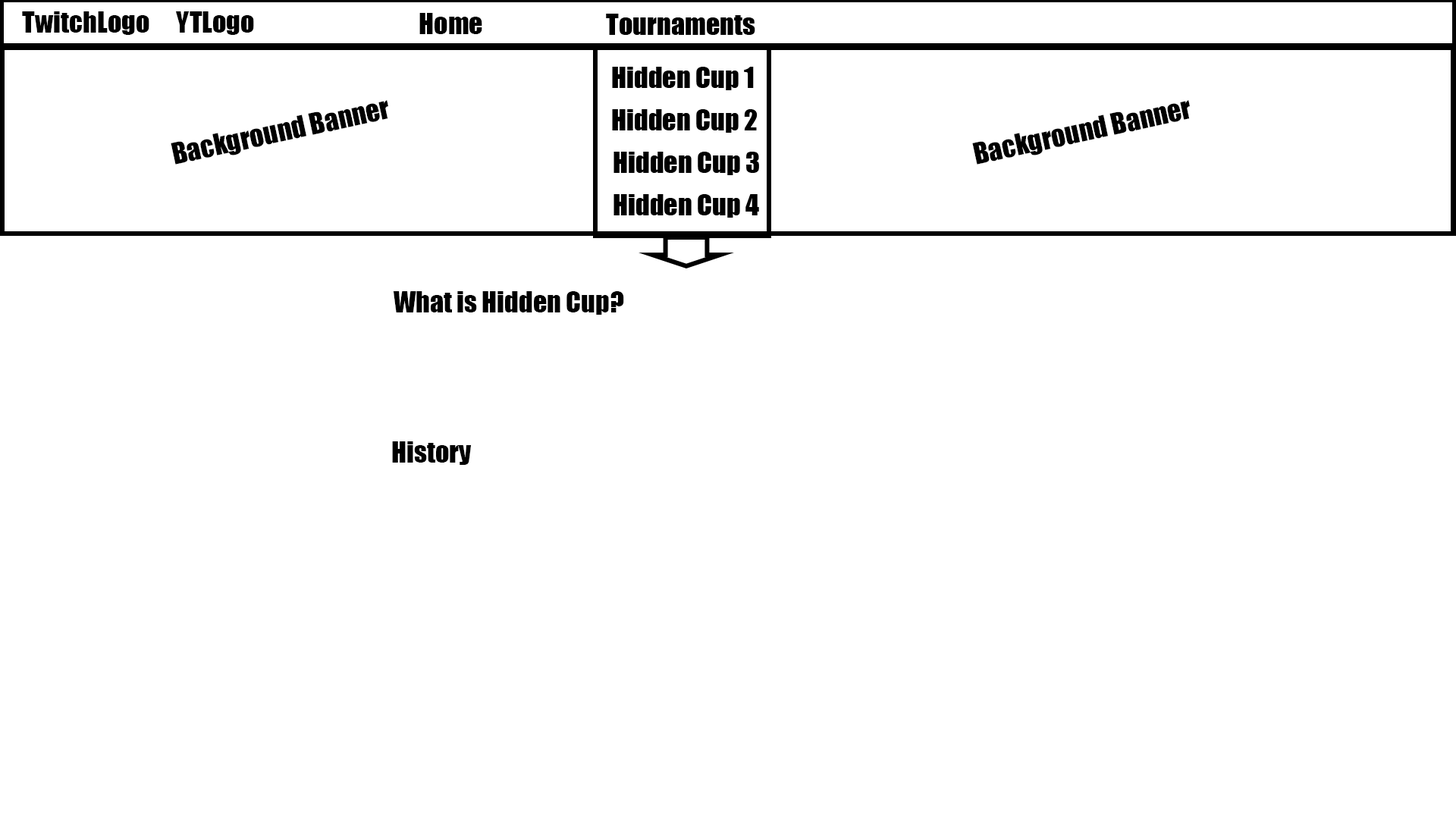
<style>
.page{position:relative;width:1456px;height:819px;background:#ffffff}
.page>*{position:absolute;margin:0}
.t1{font:27.3px "Impact";color:#000000}
</style>
<div class="page">
<p class="t1" style="left:22px;top:11px;width:127px;height:24px">TwitchLogo</p>
<p class="t1" style="left:176px;top:11px;width:78px;height:24px">YTLogo</p>
<p class="t1" style="left:419px;top:13px;width:63px;height:21px">Home</p>
<p class="t1" style="left:171px;top:100px;width:217px;height:65px;rotate:-12deg">Background Banner</p>
<p class="t1" style="left:972px;top:100px;width:218px;height:65px;rotate:-12deg">Background Banner</p>
<p class="t1" style="left:393px;top:291px;width:231px;height:24px">What is Hidden Cup?</p>
<p class="t1" style="left:392px;top:441px;width:80px;height:24px">History</p>
</div>
